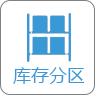
<style>
.page{position:relative;width:95px;height:95px;background:#ffffff}
.page>*{position:absolute;margin:0}
.t1{font:18px "MicrosoftYaHei";color:#3998d6}
</style>
<div class="page">
<p class="t1" style="left:13px;top:67px;width:72px;height:17px">库存分区</p>
</div>
